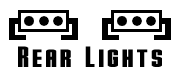
<style>
.page{position:relative;width:180px;height:78px;background:#ffffff}
.page>*{position:absolute;margin:0}
.t1{font:30px "Stark";letter-spacing:0.05em;color:#000000}
</style>
<div class="page">
<p class="t1" style="left:18px;top:46px;width:144px;height:21px">Rear Lights</p>
</div>
